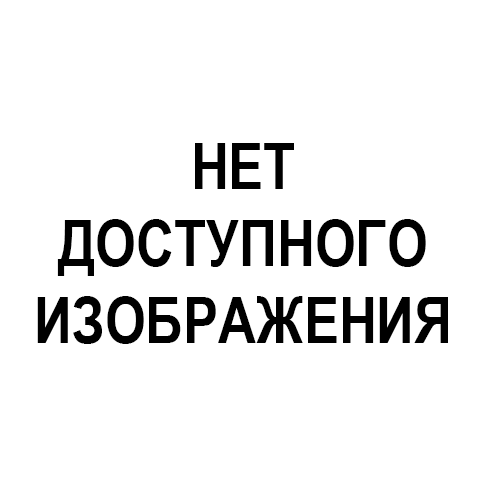
<style>
.page{position:relative;width:500px;height:500px;background:#ffffff}
.page>*{position:absolute;margin:0}
.t1{font:64px "ArialNarrow-Bold";color:#000000}
</style>
<div class="page">
<p class="t1" style="left:37px;top:143px;width:411px;height:201px;text-align:center">НЕТ<br>ДОСТУПНОГО<br>ИЗОБРАЖЕНИЯ</p>
</div>
